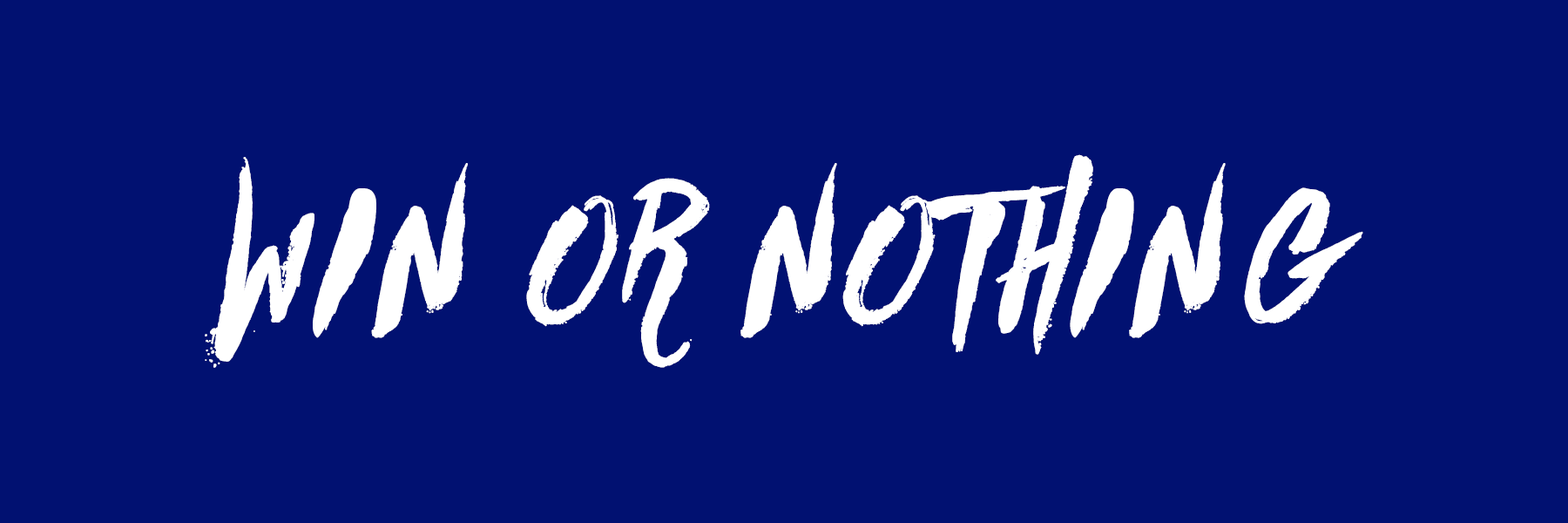
<style>
.page{position:relative;width:1568px;height:523px;background:#011171}
.page>*{position:absolute;margin:0}
.t1{font:182.9px "Againts";letter-spacing:0.07em;color:#ffffff;font-weight:bold}
</style>
<div class="page">
<p class="t1" style="left:205px;top:154px;width:1158px;height:214px">WIN OR NOTHING</p>
</div>
